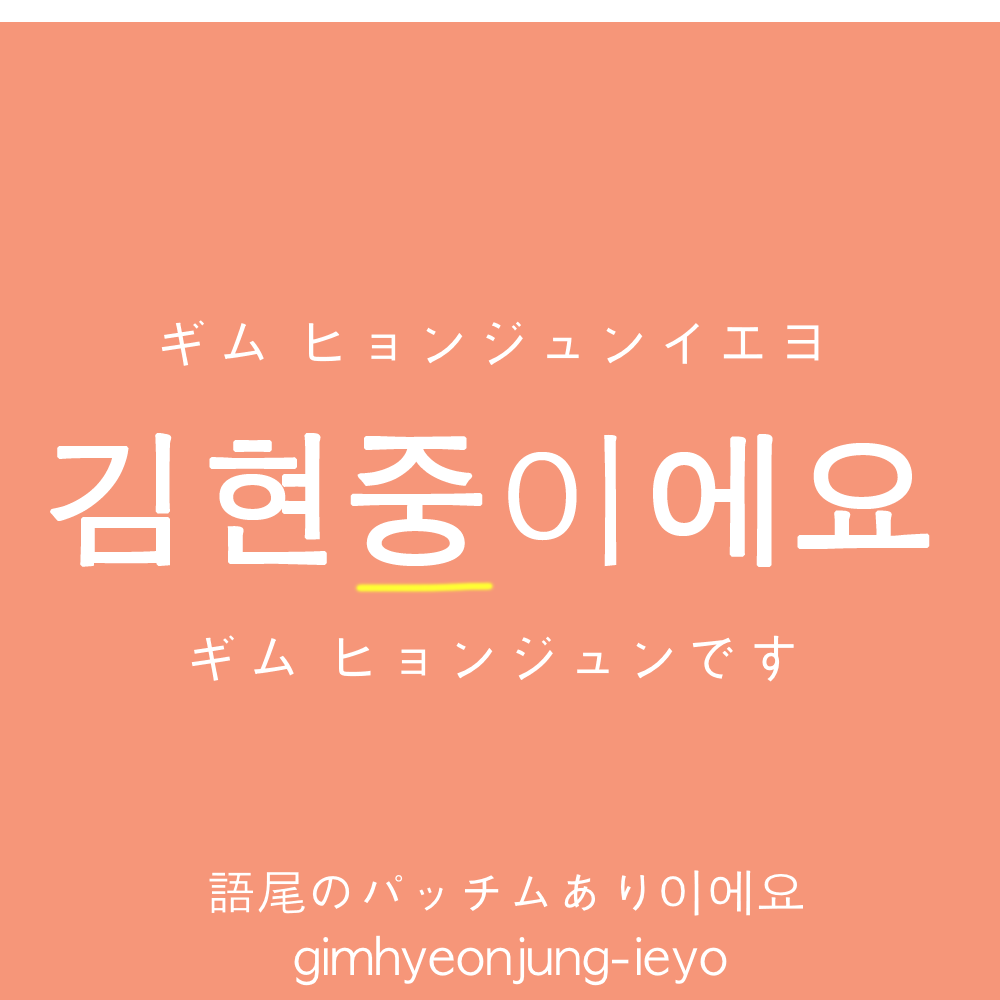
<style>
.page{position:relative;width:1000px;height:1000px;background:#f69679}
.page>*{position:absolute;margin:0}
.t1{font:60px "AppleGothic";color:#ffffff}
.t2{font:145px "AppleGothic";color:#ffffff;font-weight:bold}
.t3{font:50px "AppleGothic";color:#ffffff}
</style>
<div class="page">
<p class="t1" style="left:161px;top:320px;width:658px;height:46px">ギム ヒョンジュンイエヨ</p>
<p class="t2" style="left:50px;top:433px;width:880px;height:134px">김현중이에요</p>
<p class="t1" style="left:191px;top:635px;width:603px;height:47px">ギム ヒョンジュンです</p>
<p class="t3" style="left:294px;top:935px;width:433px;height:51px">gimhyeonjung-ieyo</p>
</div>
